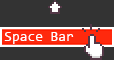
<style>
.page{position:relative;width:114px;height:60px;background:#333333}
.page>*{position:absolute;margin:0}
.t1{font:14px "Consolas";color:#ffffff}
</style>
<div class="page">
<p class="t1" style="left:4px;top:32px;width:70px;height:12px">Space Bar</p>
</div>
